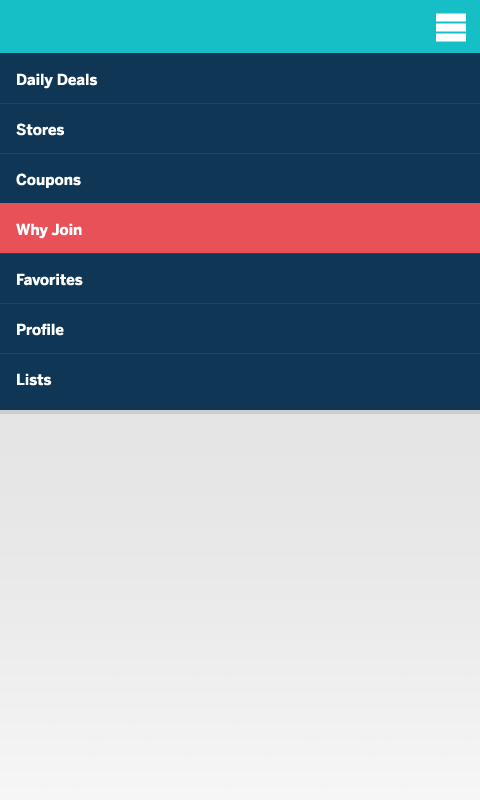
<style>
.page{position:relative;width:480px;height:800px;background:#0f3655}
.page>*{position:absolute;margin:0}
.t1{font:15px/50px "BentonSans-Bold";color:#ffffff}
</style>
<div class="page">
<p class="t1" style="left:16px;top:73px;width:82px;height:313px">Daily Deals<br>Stores<br>Coupons<br>Why Join<br>Favorites<br>Profile<br>Lists</p>
</div>
